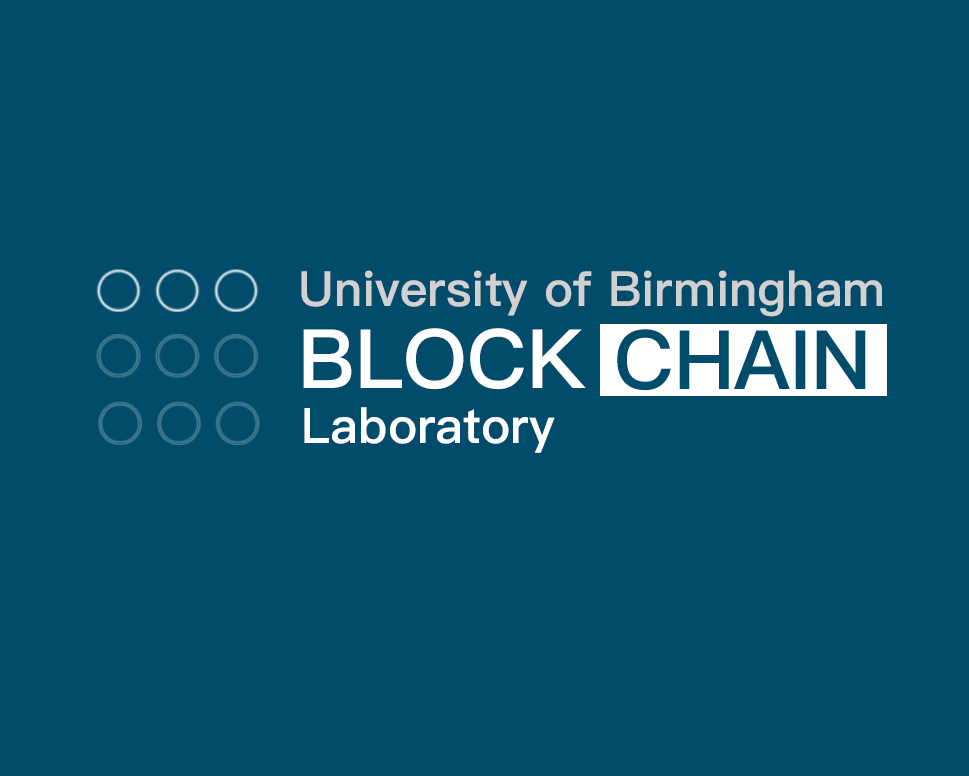
<style>
.page{position:relative;width:969px;height:776px;background:#014c6b}
.page>*{position:absolute;margin:0}
.t1{font:48.6px "PingFangSC-Semibold";color:#d2d0d0}
.t2{font:82px "PingFangSC-Semibold";color:#ffffff}
.t3{font:49px "PingFangSC-Semibold";color:#ffffff}
</style>
<div class="page">
<p class="t1" style="left:301px;top:270px;width:581px;height:47px">University of Birmingham</p>
<p class="t2" style="left:303px;top:328px;width:283px;height:62px">BLOCK</p>
<p class="t3" style="left:304px;top:407px;width:251px;height:46px">Laboratory</p>
</div>
